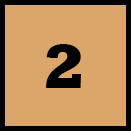
<style>
.page{position:relative;width:131px;height:131px;background:#daa66a}
.page>*{position:absolute;margin:0}
.t1{font:64px "Rockwell-ExtraBold";color:#000000}
</style>
<div class="page">
<p class="t1" style="left:46px;top:44px;width:35px;height:44px">2</p>
</div>
